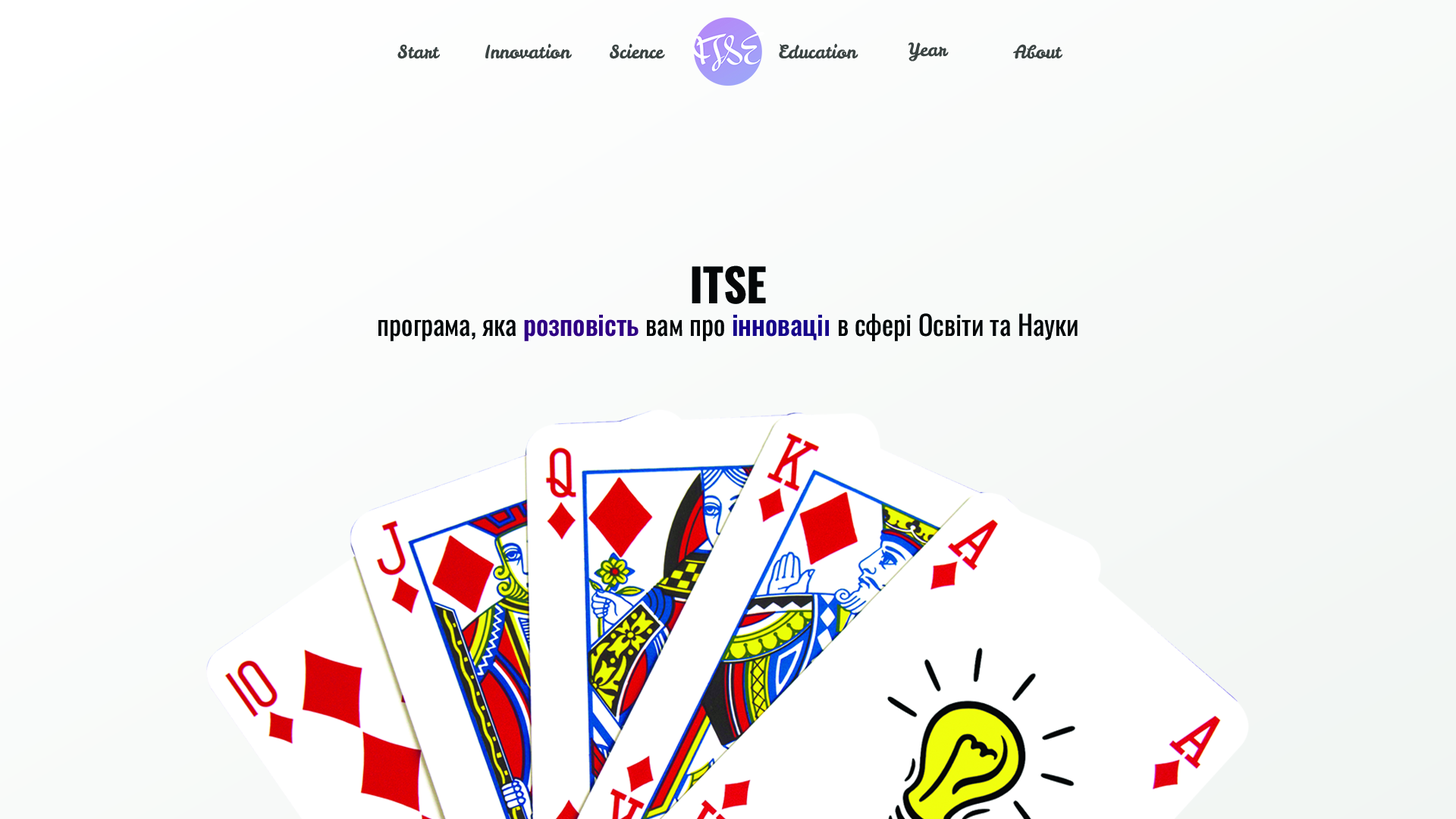
<style>
.page{position:relative;width:1456px;height:819px}
.page>*{position:absolute;margin:0}
.t1{font:18.2px "LeckerliOne-Regular";color:#3a4342}
.t2{font:27.3px "Oswald-Regular";color:#050708}
.t3{font:45.5px "Oswald-Bold";color:#050708}
.t4{font:27.3px "Oswald-Medium";color:#2f0082}
.t5{font:27.3px "Oswald-Medium";color:#15048a}
</style>
<div class="page">
<p class="t1" style="left:397px;top:44px;width:43px;height:15px">Start</p>
<p class="t1" style="left:485px;top:43px;width:87px;height:16px">Innovation</p>
<p class="t1" style="left:610px;top:43px;width:55px;height:16px">Science</p>
<p class="t1" style="left:779px;top:43px;width:79px;height:16px">Education</p>
<p class="t1" style="left:908px;top:42px;width:41px;height:19px">Year</p>
<p class="t1" style="left:1013px;top:44px;width:49px;height:15px">About</p>
<p class="t2" style="left:378px;top:265px;width:700px;height:76px;text-align:center"><span class="t3">ITSE<br></span>програма, яка <span class="t4">розповість </span>вам про <span class="t5">інновації </span>в сфері Освіти та Науки</p>
</div>
